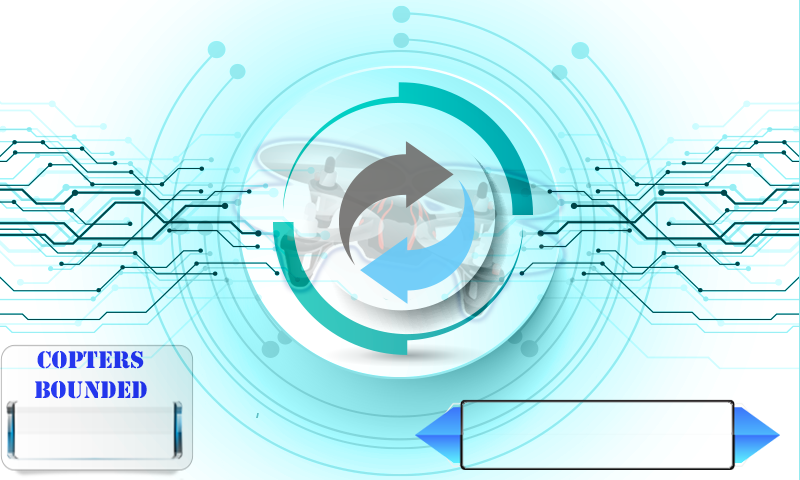
<style>
.page{position:relative;width:800px;height:480px}
.page>*{position:absolute;margin:0}
.t1{font:25px "Stencil";color:#2c3ff5}
</style>
<div class="page">
<p class="t1" style="left:35px;top:351px;width:112px;height:48px;text-align:center">COPTERS<br>BOUNDED</p>
</div>
